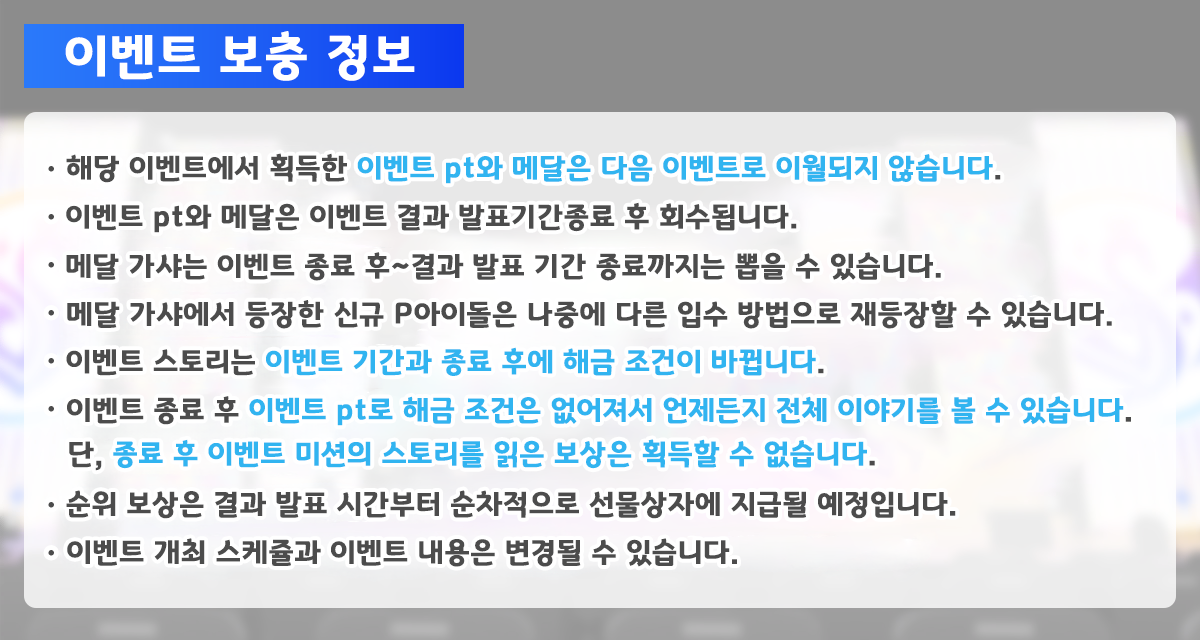
<style>
.page{position:relative;width:1200px;height:640px}
.page>*{position:absolute;margin:0}
.t1{font:50.7px "GyeonggiTitleB";letter-spacing:0.05em;color:#ffffff}
.t2{font:29.3px "GyeonggiTitleB";letter-spacing:0.03em;color:#31b4f0}
.t3{font:29.3px "GyeonggiTitleB";letter-spacing:0.03em;color:#4c4c4c}
</style>
<div class="page">
<p class="t1" style="left:65px;top:31px;width:350px;height:50px">이벤트 보충 정보</p>
<p class="t2" style="left:66px;top:153px;width:935px;height:31px"><span class="t3">해당 이벤트에서 획득한 </span>이벤트 pt와 메달은 다음 이벤트로 이월되지 않습니다<span class="t3">.</span></p>
<p class="t3" style="left:66px;top:202px;width:731px;height:31px">이벤트 pt와 메달은 이벤트 결과 발표기간종료 후 회수됩니다.</p>
<p class="t3" style="left:66px;top:252px;width:875px;height:29px">메달 가샤는 이벤트 종료 후~결과 발표 기간 종료까지는 뽑을 수 있습니다.</p>
<p class="t3" style="left:67px;top:300px;width:1045px;height:29px">메달 가샤에서 등장한 신규 P아이돌은 나중에 다른 입수 방법으로 재등장할 수 있습니다.</p>
<p class="t2" style="left:66px;top:347px;width:758px;height:29px"><span class="t3">이벤트 스토리는 </span>이벤트 기간과 종료 후에 해금 조건이 바뀝니다<span class="t3">.</span></p>
<p class="t2" style="left:67px;top:396px;width:1064px;height:30px"><span class="t3">이벤트 종료 후 </span>이벤트 pt로 해금 조건은 없어져서 언제든지 전체 이야기를 볼 수 있습니다<span class="t3">.</span></p>
<p class="t2" style="left:69px;top:439px;width:806px;height:32px"><span class="t3">단, </span>종료 후 이벤트 미션의 스토리를 읽은 보상은 획득할 수 없습니다<span class="t3">.</span></p>
<p class="t3" style="left:66px;top:490px;width:890px;height:29px">순위 보상은 결과 발표 시간부터 순차적으로 선물상자에 지급될 예정입니다.</p>
<p class="t3" style="left:67px;top:538px;width:670px;height:29px">이벤트 개최 스케쥴과 이벤트 내용은 변경될 수 있습니다.</p>
</div>
